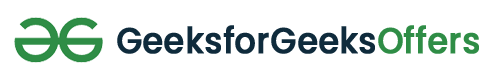
<style>
.page{position:relative;width:500px;height:83px;background:#ffffff}
.page>*{position:absolute;margin:0}
.t1{font:36.1px "Poppins-Medium";color:#0f2b3c;font-weight:bold;scale:0.92 1}
.t2{font:36.1px "Poppins-Medium";letter-spacing:-0.02em;color:#2f8d46;font-weight:bold;scale:0.92 1}
.t3{font:36.1px "Poppins-Medium";color:#2f8d46;font-weight:bold;scale:0.92 1}
</style>
<div class="page">
<p class="t1" style="left:117px;top:25px;width:362px;height:29px">GeeksforGeeks<span class="t2">O</span><span class="t3">ffers</span></p>
</div>
